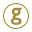
<style>
.page{position:relative;width:32px;height:32px;background:#ffffff}
.page>*{position:absolute;margin:0}
.t1{font:25px "GillSansMT";color:#9f8838}
</style>
<div class="page">
<p class="t1" style="left:11px;top:7px;width:11px;height:18px">g</p>
</div>
